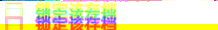
<style>
.page{position:relative;width:218px;height:30px;background:#ffffff}
.page>*{position:absolute;margin:0}
.t1{font:16px "SourceHanSansSC-Regular";font-weight:bold}
</style>
<div class="page">
<p class="t1" style="left:35px;top:8px;width:81px;height:16px">锁定该存档</p>
</div>
